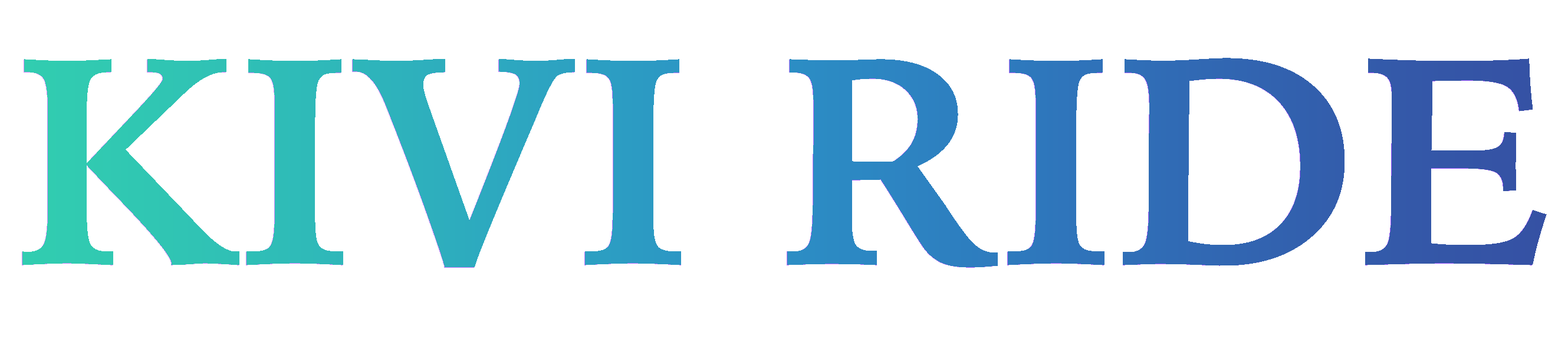
<style>
.page{position:relative;width:1568px;height:348px;background:#ffffff}
.page>*{position:absolute;margin:0}
.t1{font:294.8px "IowanOldStyle-Bold"}
</style>
<div class="page">
<p class="t1" style="left:22px;top:58px;width:1525px;height:209px">KIVI RIDE</p>
</div>
